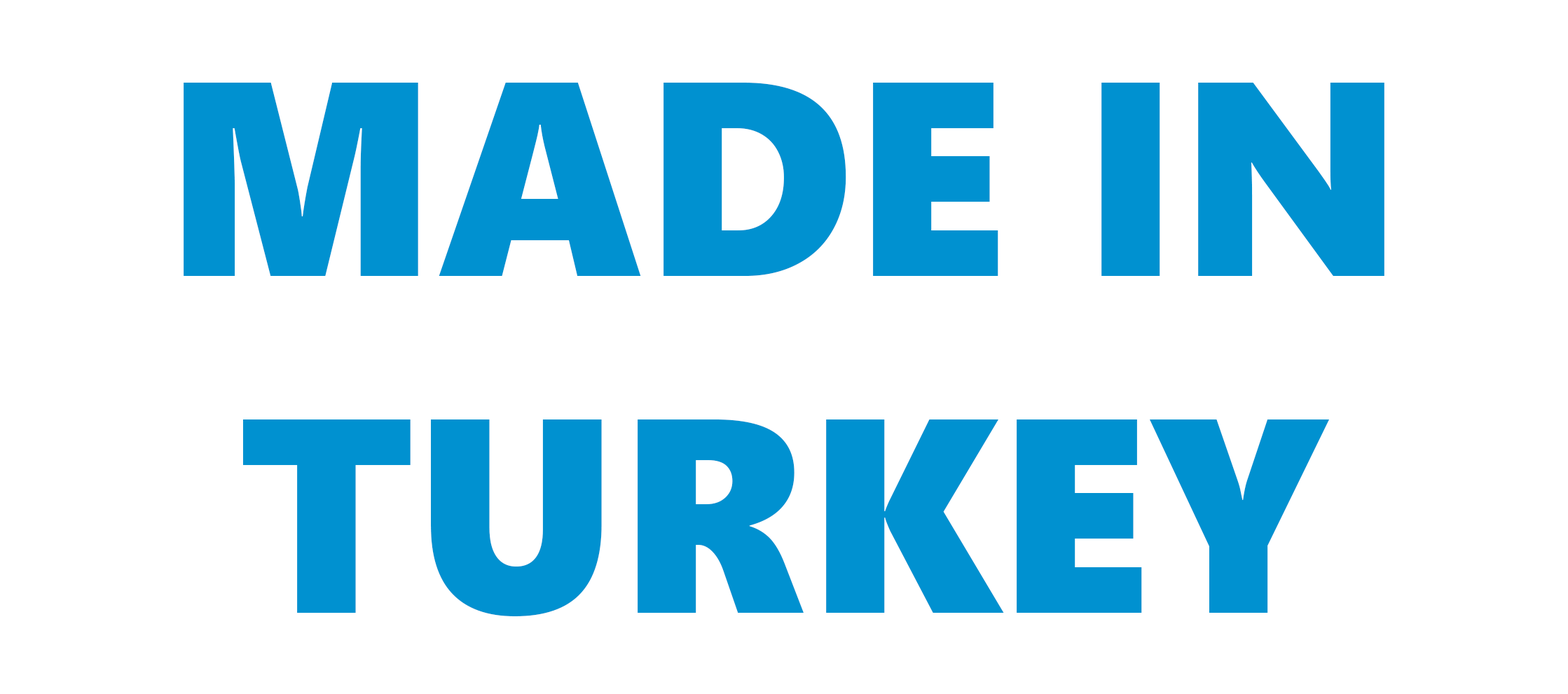
<style>
.page{position:relative;width:1568px;height:694px;background:#ffffff}
.page>*{position:absolute;margin:0}
.t1{font:276.1px/337.3px "SegoeUIBlack";color:#0091d0}
</style>
<div class="page">
<p class="t1" style="left:184px;top:83px;width:1200px;height:534px;text-align:center">MADE IN<br>TURKEY</p>
</div>
